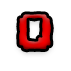
<style>
.page{position:relative;width:71px;height:71px;background:#ffffff}
.page>*{position:absolute;margin:0}
.t1{font:55px "Tipi-Organic"}
</style>
<div class="page">
<p class="t1" style="left:19px;top:14px;width:32px;height:36px">0</p>
</div>
